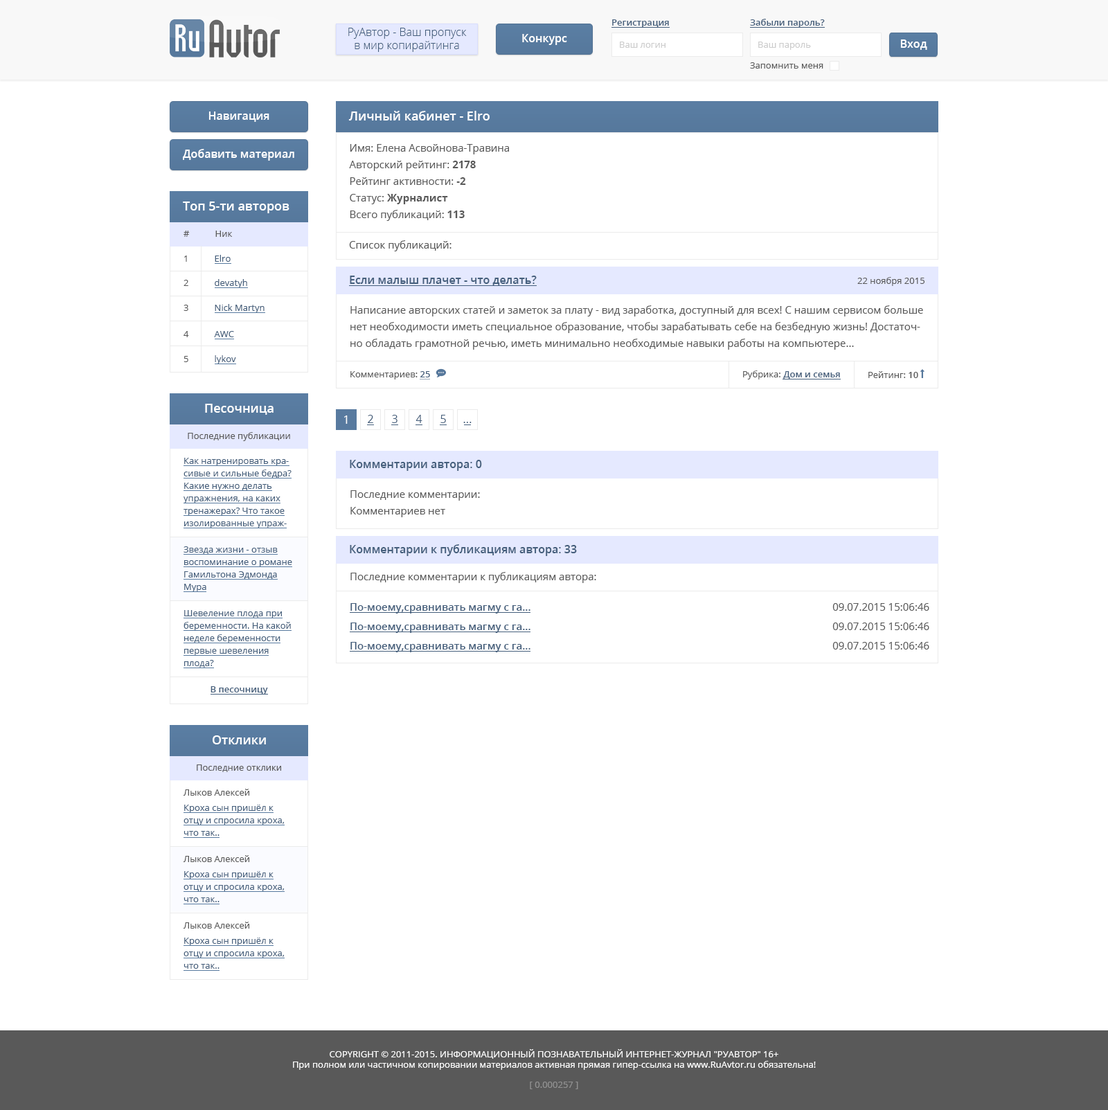
<style>
.page{position:relative;width:1108px;height:1110px;background:#ffffff}
.page>*{position:absolute;margin:0}
.t1{font:11.1px "OpenSans-Light";color:#455f7c}
.t2{font:9px "OpenSans-Semibold";color:#455f7c}
.t3{font:11.1px "OpenSans-Semibold";color:#ffffff}
.t4{font:9px "OpenSans";color:#cccccc}
.t5{font:9px "OpenSans";color:#595959}
.t6{font:12.5px "OpenSans-Semibold";color:#ffffff}
.t7{font:10.4px/16.6px "OpenSans";color:#595959}
.t8{font:10.4px/16.6px "OpenSans-Bold";color:#595959}
.t9{font:10.4px "OpenSans";color:#595959}
.t10{font:9px "OpenSans";color:#455f7c}
.t11{font:11.1px "OpenSans-Semibold";color:#455f7c}
.t12{font:9px "OpenSans-Semibold";color:#595959}
.t13{font:11.1px "OpenSans";color:#ffffff}
.t14{font:11.1px "OpenSans";color:#455f7c}
.t15{font:9px/12.5px "OpenSans";color:#455f7c}
.t16{font:10.4px "OpenSans-Semibold";color:#455f7c}
.t17{font:9px "OpenSans";color:#ffffff}
.t18{font:9px "OpenSans";color:#929292}
</style>
<div class="page">
<p class="t1" style="left:348px;top:28px;width:119px;height:24px;text-align:center">РуАвтор - Ваш пропуск<br>в мир копирайтинга</p>
<p class="t2" style="left:612px;top:19px;width:57px;height:9px">Регистрация</p>
<p class="t2" style="left:750px;top:19px;width:75px;height:9px">Забыли пароль?</p>
<p class="t3" style="left:522px;top:34px;width:45px;height:11px">Конкурс</p>
<p class="t4" style="left:620px;top:42px;width:45px;height:6px">Ваш логин</p>
<p class="t4" style="left:758px;top:42px;width:53px;height:8px">Ваш пароль</p>
<p class="t3" style="left:900px;top:39px;width:27px;height:11px">Вход</p>
<p class="t5" style="left:750px;top:62px;width:73px;height:7px">Запомнить меня</p>
<p class="t3" style="left:208px;top:111px;width:61px;height:11px">Навигация</p>
<p class="t6" style="left:348px;top:111px;width:141px;height:9px">Личный кабинет - Elro</p>
<p class="t3" style="left:183px;top:149px;width:111px;height:12px">Добавить материал</p>
<p class="t7" style="left:349px;top:144px;width:160px;height:77px">Имя: Елена Асвойнова-Травина<br>Авторский рейтинг: <span class="t8">2178<br></span>Рейтинг активности: <span class="t8">-2<br></span>Статус: <span class="t8">Журналист<br></span>Всего публикаций:<span class="t8"> 113</span></p>
<p class="t6" style="left:183px;top:201px;width:106px;height:12px">Топ 5-ти авторов</p>
<p class="t5" style="left:183px;top:231px;width:50px;height:6px">#           Ник</p>
<p class="t9" style="left:349px;top:240px;width:102px;height:11px">Список публикаций:</p>
<p class="t10" style="left:184px;top:255px;width:47px;height:7px"><span class="t5">1           </span>Elro</p>
<p class="t10" style="left:183px;top:279px;width:64px;height:9px"><span class="t5">2           </span>devatyh</p>
<p class="t11" style="left:350px;top:276px;width:187px;height:10px">Если малыш плачет - что делать?</p>
<p class="t5" style="left:857px;top:277px;width:67px;height:9px">22 ноября 2015</p>
<p class="t10" style="left:183px;top:304px;width:81px;height:9px"><span class="t5">3           </span>Nick Martyn</p>
<p class="t7" style="left:350px;top:305px;width:573px;height:45px">Написание авторских статей и заметок за плату - вид заработка, доступный для всех! С нашим сервисом больше нет необходимости иметь специальное образование, чтобы зарабатывать себе на безбедную жизнь! Достаточно обладать грамотной речью, иметь минимально необходимые навыки работы на компьютере...</p>
<p class="t10" style="left:183px;top:331px;width:51px;height:6px"><span class="t5">4           </span>AWC</p>
<p class="t10" style="left:183px;top:355px;width:53px;height:9px"><span class="t5">5           </span>lykov</p>
<p class="t5" style="left:350px;top:371px;width:80px;height:8px">Комментариев: <span class="t2">25</span></p>
<p class="t2" style="left:743px;top:370px;width:97px;height:9px"><span class="t5">Рубрика: </span>Дом и семья</p>
<p class="t5" style="left:868px;top:371px;width:50px;height:7px">Рейтинг: <span class="t12">10</span></p>
<p class="t6" style="left:205px;top:404px;width:68px;height:11px">Песочница</p>
<p class="t13" style="left:344px;top:415px;width:4px;height:9px">1</p>
<p class="t14" style="left:368px;top:415px;width:5px;height:8px">2</p>
<p class="t14" style="left:392px;top:415px;width:5px;height:8px">3</p>
<p class="t14" style="left:415px;top:415px;width:7px;height:8px">4</p>
<p class="t14" style="left:440px;top:415px;width:6px;height:8px">5</p>
<p class="t14" style="left:463px;top:422px;width:8px;height:1px">...</p>
<p class="t5" style="left:188px;top:432px;width:102px;height:9px">Последние публикации</p>
<p class="t15" style="left:183px;top:458px;width:108px;height:70px">Как натренировать красивые и сильные бедра? Какие нужно делать упражнения, на каких тренажерах? Что такое изолированные упражнения и для чего они нужны?</p>
<p class="t11" style="left:350px;top:460px;width:132px;height:11px">Комментарии автора: 0</p>
<p class="t7" style="left:350px;top:490px;width:130px;height:27px">Последние комментарии:<br>Комментариев нет</p>
<p class="t11" style="left:350px;top:544px;width:227px;height:12px">Комментарии к публикациям автора: 33</p>
<p class="t15" style="left:183px;top:546px;width:109px;height:46px">Звезда жизни - отзыв воспоминание о романе Гамильтона Эдмонда Мура</p>
<p class="t9" style="left:350px;top:572px;width:246px;height:11px">Последние комментарии к публикациям автора:</p>
<p class="t16" style="left:350px;top:603px;width:579px;height:10px">По-моему,сравнивать магму с га...                                                                                                          <span class="t9">09.07.2015 15:06:46</span></p>
<p class="t15" style="left:183px;top:610px;width:108px;height:57px">Шевеление плода при беременности. На какой неделе беременности первые шевеления плода?</p>
<p class="t16" style="left:350px;top:622px;width:579px;height:11px">По-моему,сравнивать магму с га...                                                                                                          <span class="t9">09.07.2015 15:06:46</span></p>
<p class="t16" style="left:350px;top:642px;width:579px;height:10px">По-моему,сравнивать магму с га...                                                                                                          <span class="t9">09.07.2015 15:06:46</span></p>
<p class="t2" style="left:210px;top:686px;width:58px;height:8px">В песочницу</p>
<p class="t6" style="left:213px;top:735px;width:53px;height:9px">Отклики</p>
<p class="t5" style="left:197px;top:764px;width:84px;height:8px">Последние отклики</p>
<p class="t5" style="left:183px;top:789px;width:66px;height:6px">Лыков Алексей</p>
<p class="t15" style="left:183px;top:804px;width:102px;height:32px">Кроха сын пришёл к отцу и спросила кроха, что так..</p>
<p class="t5" style="left:183px;top:855px;width:66px;height:7px">Лыков Алексей</p>
<p class="t15" style="left:183px;top:871px;width:102px;height:31px">Кроха сын пришёл к отцу и спросила кроха, что так..</p>
<p class="t5" style="left:183px;top:921px;width:66px;height:7px">Лыков Алексей</p>
<p class="t15" style="left:183px;top:937px;width:102px;height:32px">Кроха сын пришёл к отцу и спросила кроха, что так..</p>
<p class="t17" style="left:293px;top:1049px;width:523px;height:21px;text-align:center">COPYRIGHT © 2011-2015. ИНФОРМАЦИОННЫЙ ПОЗНАВАТЕЛЬНЫЙ ИНТЕРНЕТ-ЖУРНАЛ "РУАВТОР" 16+<br>При полном или частичном копировании материалов активная прямая гипер-ссылка на www.RuAvtor.ru обязательна!</p>
<p class="t18" style="left:530px;top:1081px;width:48px;height:8px">[ 0.000257 ]</p>
</div>
